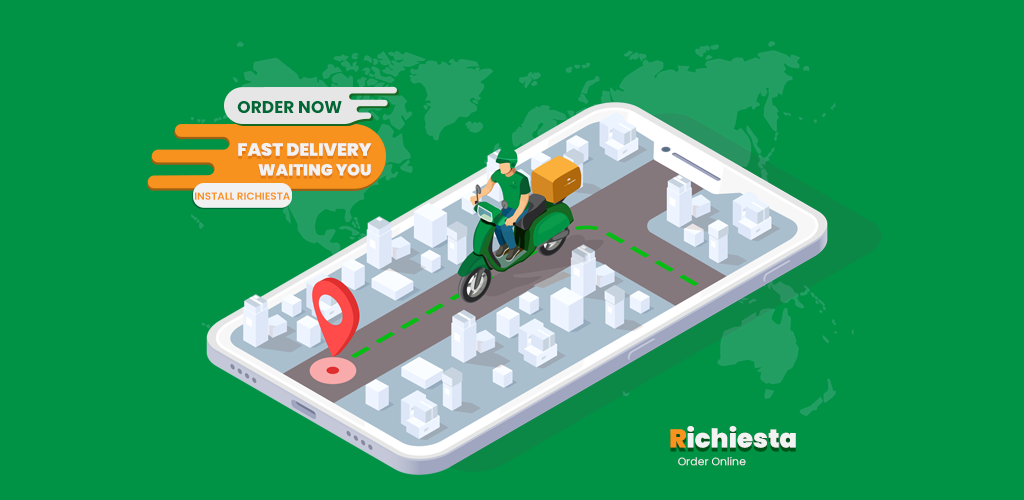
<style>
.page{position:relative;width:1024px;height:500px;background:#009245}
.page>*{position:absolute;margin:0}
.t1{font:16.9px "Poppins-Bold";color:#006837}
.t2{font:17.8px "Poppins-Black";color:#f2f2f2}
.t3{font:16px "Poppins-Black";color:#f2f2f2}
.t4{font:10.4px "Poppins-SemiBold";color:#f7921e;text-transform:uppercase}
.t5{font:25.9px "Poppins-Black";color:#f2f2f2}
.t6{font:25.9px "Poppins-Black";color:#f7931e}
.t7{font:10.8px "Poppins-Regular";color:#f2f2f2}
</style>
<div class="page">
<p class="t1" style="left:237px;top:101px;width:105px;height:12px">ORDER NOW</p>
<p class="t2" style="left:238px;top:143px;width:134px;height:13px">FAST DELIVERY</p>
<p class="t3" style="left:258px;top:164px;width:113px;height:12px">WAITING YOU</p>
<p class="t4" style="left:195px;top:192px;width:95px;height:8px">Install Richiesta</p>
<p class="t5" style="left:670px;top:426px;width:126px;height:22px"><span class="t6">R</span>ichiesta</p>
<p class="t7" style="left:678px;top:457px;width:68px;height:9px">Order Online</p>
</div>
